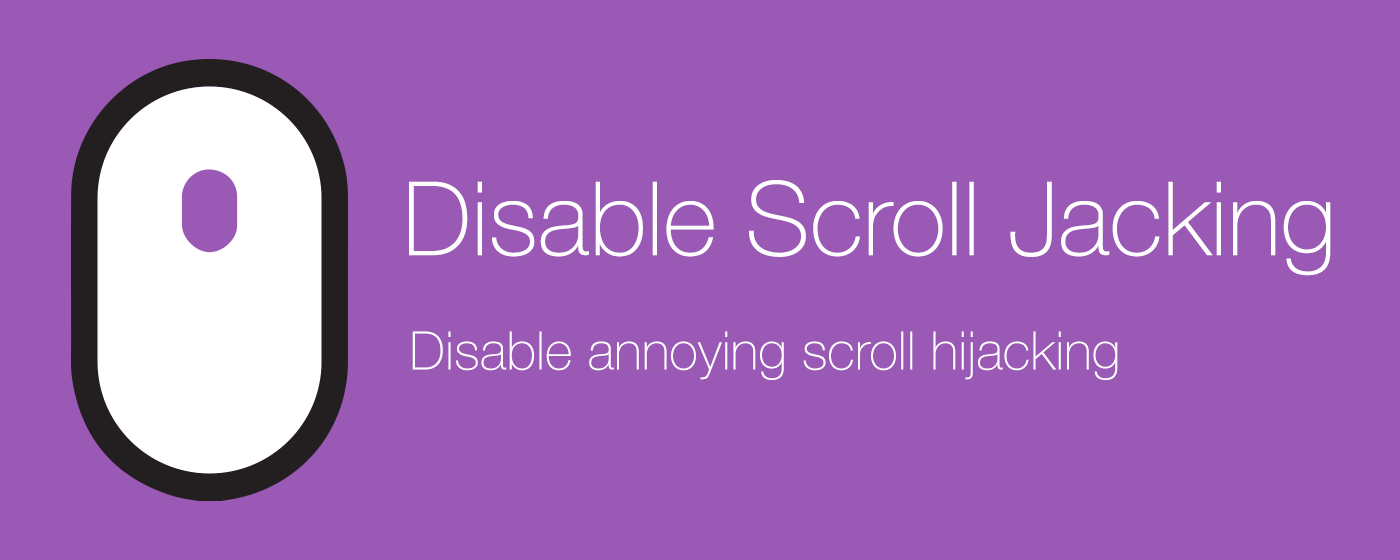
<style>
.page{position:relative;width:1400px;height:560px;background:#9b59b6}
.page>*{position:absolute;margin:0}
.t1{font:102.6px "HelveticaNeue-Thin";color:#ffffff}
.t2{font:53.3px "HelveticaNeue-Thin";color:#ffffff}
</style>
<div class="page">
<p class="t1" style="left:409px;top:180px;width:922px;height:96px">Disable Scroll Jacking</p>
<p class="t2" style="left:412px;top:331px;width:706px;height:49px">Disable annoying scroll hijacking</p>
</div>
